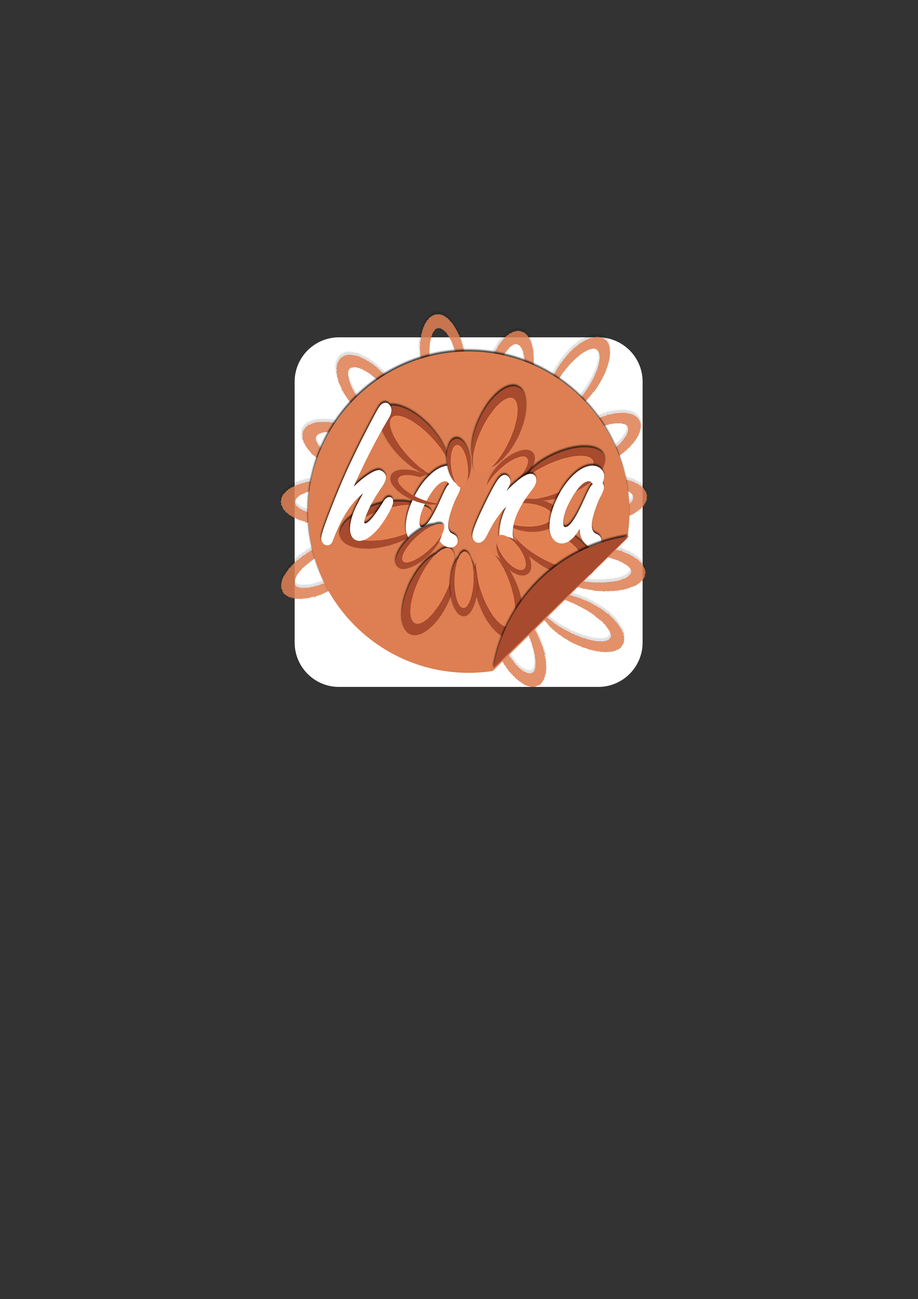
<style>
.page{position:relative;width:918px;height:1299px;background:#333333}
.page>*{position:absolute;margin:0}
.t1{font:233.7px "FreestyleScript-Regular";letter-spacing:0.05em;color:#ffffff;font-weight:bold;scale:0.92 1}
</style>
<div class="page">
<p class="t1" style="left:321px;top:402px;width:284px;height:153px">hana</p>
</div>
